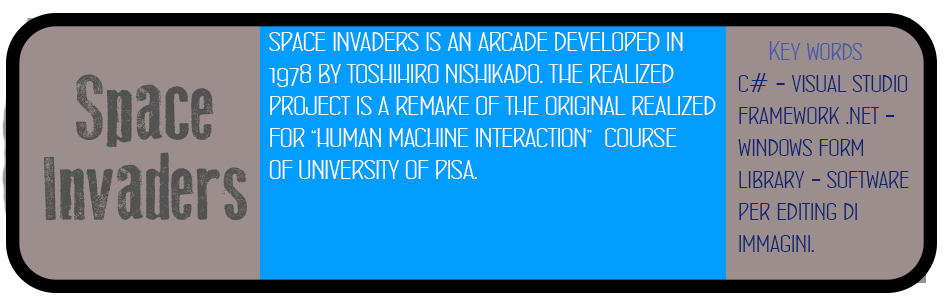
<style>
.page{position:relative;width:945px;height:302px;background:#009cff}
.page>*{position:absolute;margin:0}
.t1{font:26.7px "ConcursoItalianBTNWide";color:#ffffff}
.t2{font:26.7px "ConcursoItalianBTNWide";color:#112672}
.t3{font:26.7px "ConcursoItalianBTNWide";color:#455baa}
.t4{font:93.3px "OldPress";color:#525252}
.t5{font:80px "ConcursoItalianBTNWide";color:#525252}
</style>
<div class="page">
<p class="t1" style="left:269px;top:32px;width:447px;height:147px">SPACE INVADERS IS AN ARCADE DEVELOPED IN <br>1978 BY TOSHIHIRO NISHIKADO. THE REALIZED <br>PROJECT IS A REMAKE OF THE ORIGINAL REALIZED<br>FOR “HUMAN MACHINE INTERACTION”  COURSE<br>OF UNIVERSITY OF PISA.</p>
<p class="t2" style="left:738px;top:41px;width:171px;height:211px"><span class="t3">     Key words<br></span>c# - visual studio<br>framework .net -<br>windows form <br>library - software <br>per editing di <br>immagini.</p>
<p class="t4" style="left:76px;top:74px;width:139px;height:74px"><span class="t5"> </span>Space</p>
<p class="t4" style="left:43px;top:152px;width:204px;height:69px">Invaders</p>
</div>
